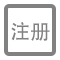
<style>
.page{position:relative;width:60px;height:60px;background:#ffffff}
.page>*{position:absolute;margin:0}
.t1{font:20.2px "AdobeHeitiStd-Regular";color:#818181}
</style>
<div class="page">
<p class="t1" style="left:11px;top:22px;width:39px;height:19px">注册</p>
</div>
